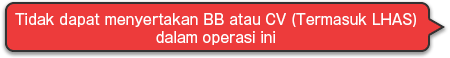
<style>
.page{position:relative;width:450px;height:58px;background:#ed3b3b}
.page>*{position:absolute;margin:0}
.t1{font:14px/18px "GothicMB101Pro-Regular";color:#ffffff}
</style>
<div class="page">
<p class="t1" style="left:15px;top:13px;width:401px;height:32px;text-align:center">Tidak dapat menyertakan BB atau CV (Termasuk LHAS)<br>dalam operasi ini</p>
</div>
